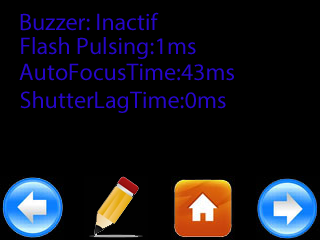
<style>
.page{position:relative;width:320px;height:240px;background:#000000}
.page>*{position:absolute;margin:0}
.t1{font:24px "MyriadPro-Regular";color:#2606ca}
</style>
<div class="page">
<p class="t1" style="left:20px;top:12px;width:139px;height:19px">Buzzer: Inactif</p>
<p class="t1" style="left:21px;top:37px;width:175px;height:22px">Flash Pulsing:1ms</p>
<p class="t1" style="left:19px;top:63px;width:215px;height:18px">AutoFocusTime:43ms</p>
<p class="t1" style="left:20px;top:91px;width:206px;height:22px">ShutterLagTime:0ms</p>
</div>
